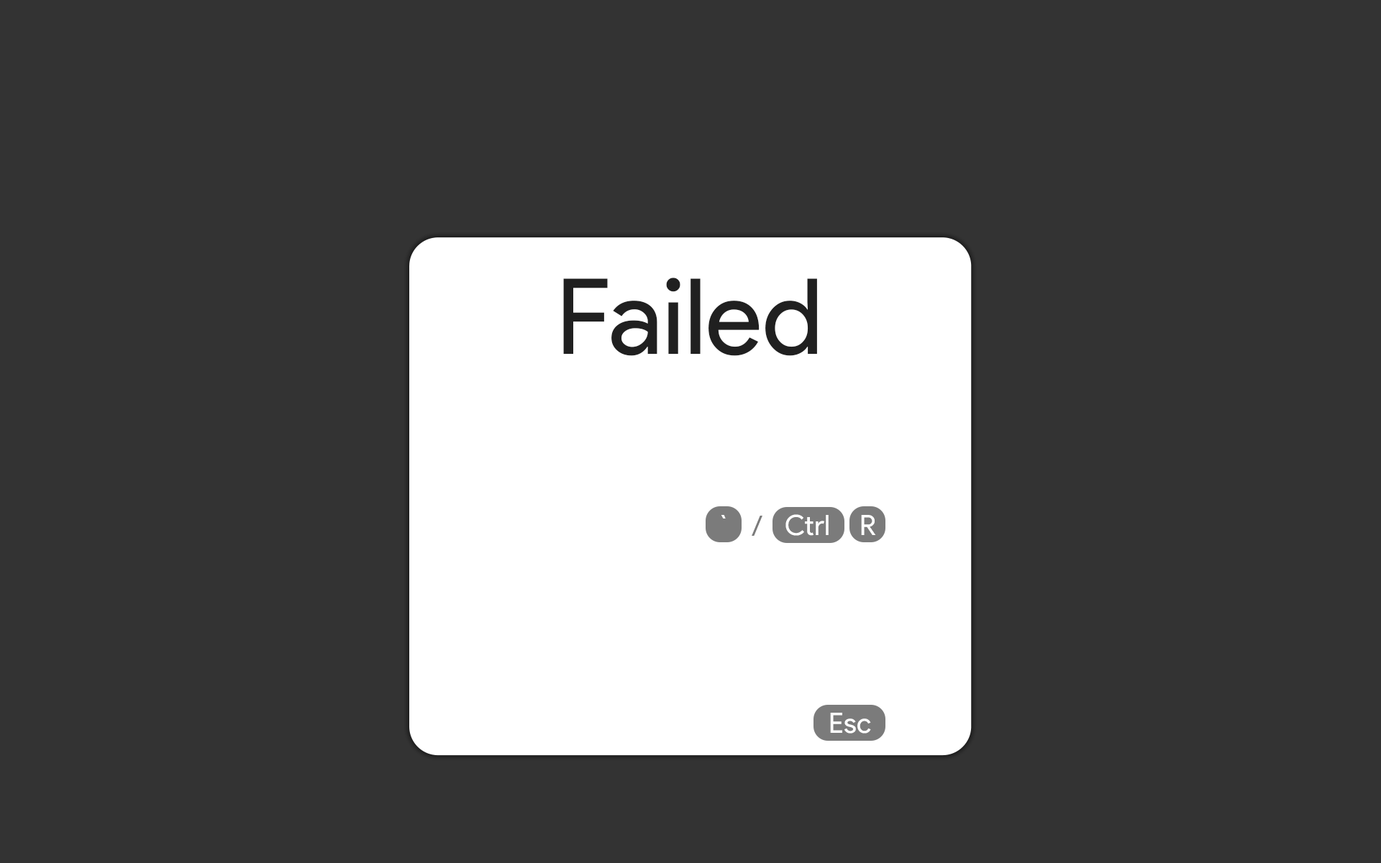
<style>
.page{position:relative;width:1381px;height:863px;background:#333333}
.page>*{position:absolute;margin:0}
.t1{font:104.9px "ProductSans-Regular";color:#202020}
.t2{font:28.1px "ProductSans-Regular";color:#ffffff}
.t3{font:28.1px "ProductSans-Regular";color:#7b7b7b}
</style>
<div class="page">
<p class="t1" style="left:563px;top:278px;width:254px;height:78px">Failed</p>
<p class="t2" style="left:721px;top:515px;width:5px;height:4px">`</p>
<p class="t3" style="left:752px;top:516px;width:11px;height:20px">/</p>
<p class="t2" style="left:786px;top:514px;width:43px;height:22px">Ctrl</p>
<p class="t2" style="left:861px;top:515px;width:15px;height:20px">R</p>
<p class="t2" style="left:830px;top:713px;width:41px;height:21px">Esc</p>
</div>
